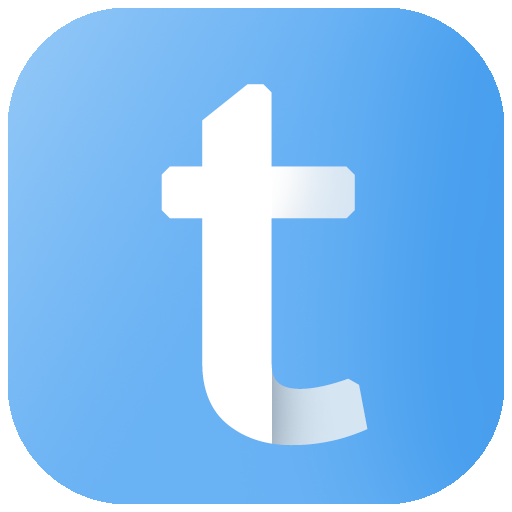
<style>
.page{position:relative;width:512px;height:512px;background:#ffffff}
.page>*{position:absolute;margin:0}
.t1{font:560px "AverageSans-Regular";color:#ffffff;font-weight:bold;scale:1.15 1}
</style>
<div class="page">
<p class="t1" style="left:161px;top:84px;width:207px;height:362px">t</p>
</div>
